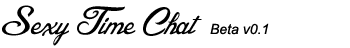
<style>
.page{position:relative;width:350px;height:48px;background:#ffffff}
.page>*{position:absolute;margin:0}
.t1{font:50px "BlessedDay";color:#000000}
.t2{font:14px "Arial-ItalicMT";color:#000000}
</style>
<div class="page">
<p class="t1" style="left:2px;top:5px;width:200px;height:41px">Sexy Time Chat</p>
<p class="t2" style="left:210px;top:23px;width:59px;height:12px">Beta v0.1</p>
</div>
